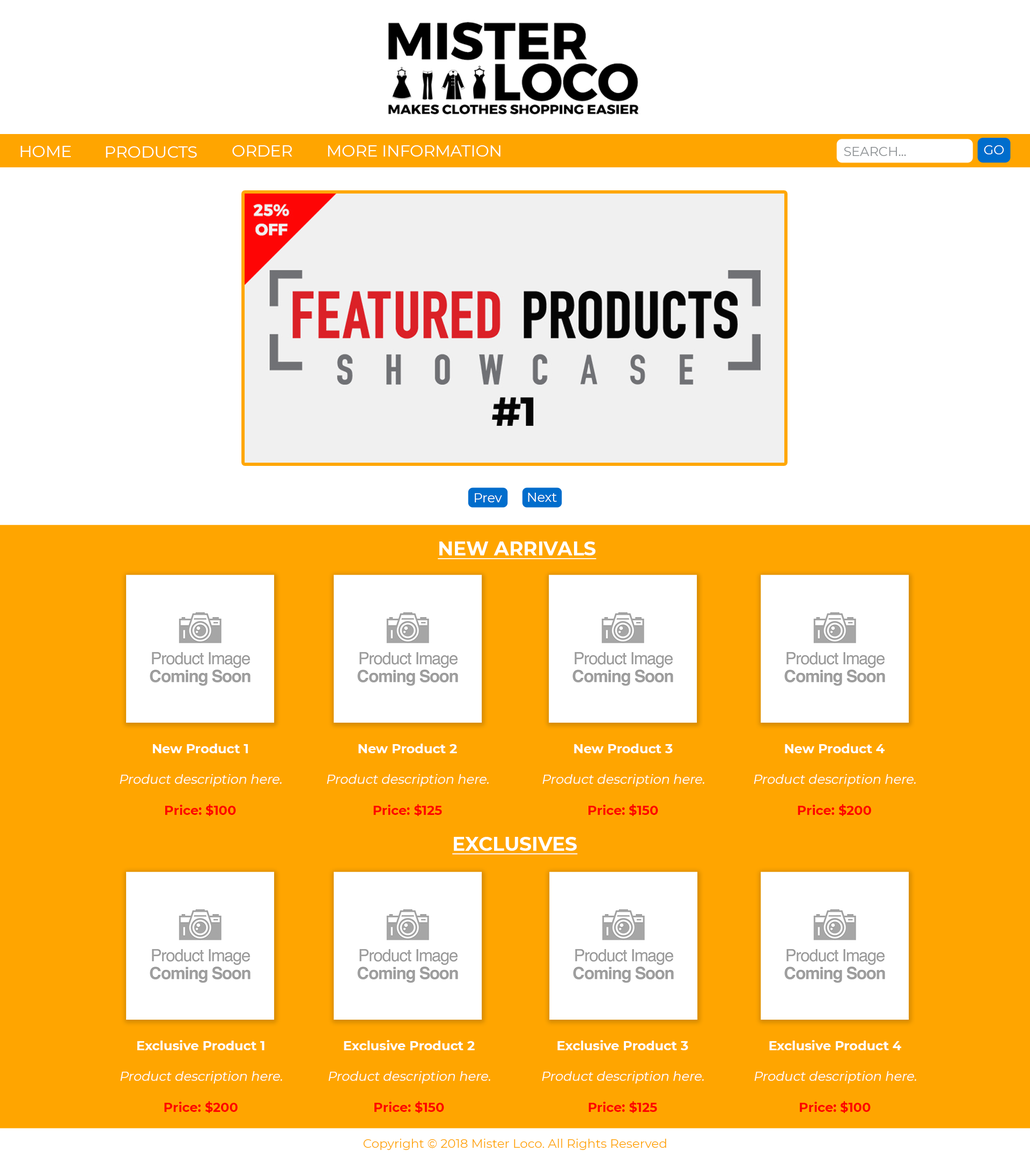
<style>
.page{position:relative;width:1030px;height:1158px;background:#ffffff}
.page>*{position:absolute;margin:0}
.t1{font:16.1px "Montserrat-Regular";color:#ffffff}
.t2{font:12.9px "Montserrat-Regular";color:#8b8f92}
.t3{font:12.9px "Montserrat-Regular";color:#ffffff}
.t4{font:19.3px "Montserrat-Bold";color:#ffffff;text-decoration:underline}
.t5{font:12.9px "Montserrat-Regular";color:#ffffff;font-style:italic}
.t6{font:12.9px "Montserrat-Bold";color:#ffffff}
.t7{font:12.9px "Montserrat-Bold";color:#fe0000}
.t8{font:12.3px "Montserrat-Regular";color:#ffa500}
</style>
<div class="page">
<p class="t1" style="left:20px;top:146px;width:51px;height:11px">HOME</p>
<p class="t1" style="left:106px;top:146px;width:91px;height:12px">PRODUCTS</p>
<p class="t1" style="left:232px;top:145px;width:60px;height:12px">ORDER</p>
<p class="t1" style="left:328px;top:145px;width:172px;height:12px">MORE INFORMATION</p>
<p class="t2" style="left:843px;top:147px;width:63px;height:9px">SEARCH...</p>
<p class="t3" style="left:983px;top:145px;width:20px;height:9px">GO</p>
<p class="t3" style="left:475px;top:493px;width:27px;height:9px">Prev</p>
<p class="t3" style="left:528px;top:493px;width:29px;height:9px">Next</p>
<p class="t4" style="left:438px;top:542px;width:158px;height:17px">NEW ARRIVALS</p>
<p class="t5" style="left:120px;top:744px;width:162px;height:72px;text-align:center"><span class="t6">New Product 1<br><br></span>Product description here.<br><br><span class="t7">Price: $100</span></p>
<p class="t5" style="left:327px;top:744px;width:161px;height:72px;text-align:center"><span class="t6">New Product 2<br><br></span>Product description here.<br><br><span class="t7">Price: $125</span></p>
<p class="t5" style="left:542px;top:744px;width:162px;height:72px;text-align:center"><span class="t6">New Product 3<br><br></span>Product description here.<br><br><span class="t7">Price: $150</span></p>
<p class="t5" style="left:753px;top:744px;width:162px;height:72px;text-align:center"><span class="t6">New Product 4<br><br></span>Product description here.<br><br><span class="t7">Price: $200</span></p>
<p class="t4" style="left:452px;top:837px;width:126px;height:18px">EXCLUSIVES</p>
<p class="t5" style="left:120px;top:1040px;width:162px;height:73px;text-align:center"><span class="t6">Exclusive Product 1<br><br></span>Product description here.<br><br><span class="t7">Price: $200</span></p>
<p class="t5" style="left:328px;top:1040px;width:162px;height:73px;text-align:center"><span class="t6">Exclusive Product 2<br><br></span>Product description here.<br><br><span class="t7">Price: $150</span></p>
<p class="t5" style="left:542px;top:1040px;width:162px;height:73px;text-align:center"><span class="t6">Exclusive Product 3<br><br></span>Product description here.<br><br><span class="t7">Price: $125</span></p>
<p class="t5" style="left:754px;top:1040px;width:162px;height:73px;text-align:center"><span class="t6">Exclusive Product 4<br><br></span>Product description here.<br><br><span class="t7">Price: $100</span></p>
<p class="t8" style="left:363px;top:1139px;width:303px;height:11px">Copyright © 2018 Mister Loco. All Rights Reserved</p>
</div>
